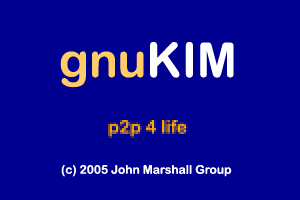
<style>
.page{position:relative;width:300px;height:200px;background:#000090}
.page>*{position:absolute;margin:0}
.t1{font:48px "ArialRoundedMTBold";color:#ffcc66}
.t2{font:48px "ArialRoundedMTBold";color:#ffffff}
.t3{font:12px "ArialRoundedMTBold";color:#ffffff}
</style>
<div class="page">
<p class="t1" style="left:60px;top:42px;width:174px;height:46px">gnu<span class="t2">KIM</span></p>
<p class="t3" style="left:61px;top:165px;width:171px;height:12px">(c) 2005 John Marshall Group</p>
</div>
